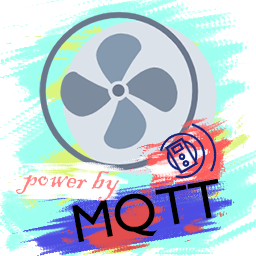
<style>
.page{position:relative;width:256px;height:256px;background:#ffffff}
.page>*{position:absolute;margin:0}
.t1{font:34px "BlackadderITC-Regular";color:#ff8484}
.t2{font:54.5px "GillSansMT";color:#000000}
</style>
<div class="page">
<p class="t1" style="left:16px;top:171px;width:103px;height:30px;rotate:3deg">power by</p>
<p class="t2" style="left:72px;top:178px;width:147px;height:65px;rotate:-10deg">MQTT</p>
</div>
